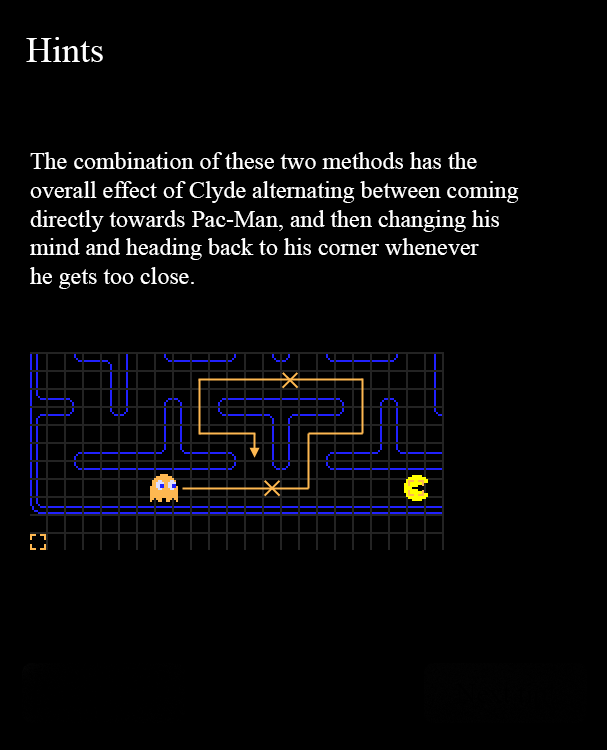
<style>
.page{position:relative;width:607px;height:750px;background:#000000}
.page>*{position:absolute;margin:0}
.t1{font:24px "TimesNewRomanPSMT";color:#ffffff}
</style>
<div class="page">
<p class="t1" style="left:30px;top:152px;width:489px;height:137px">The combination of these two methods has the<br>overall effect of Clyde alternating between coming<br>directly towards Pac-Man, and then changing his<br>mind and heading back to his corner whenever <br>he gets too close.</p>
</div>
